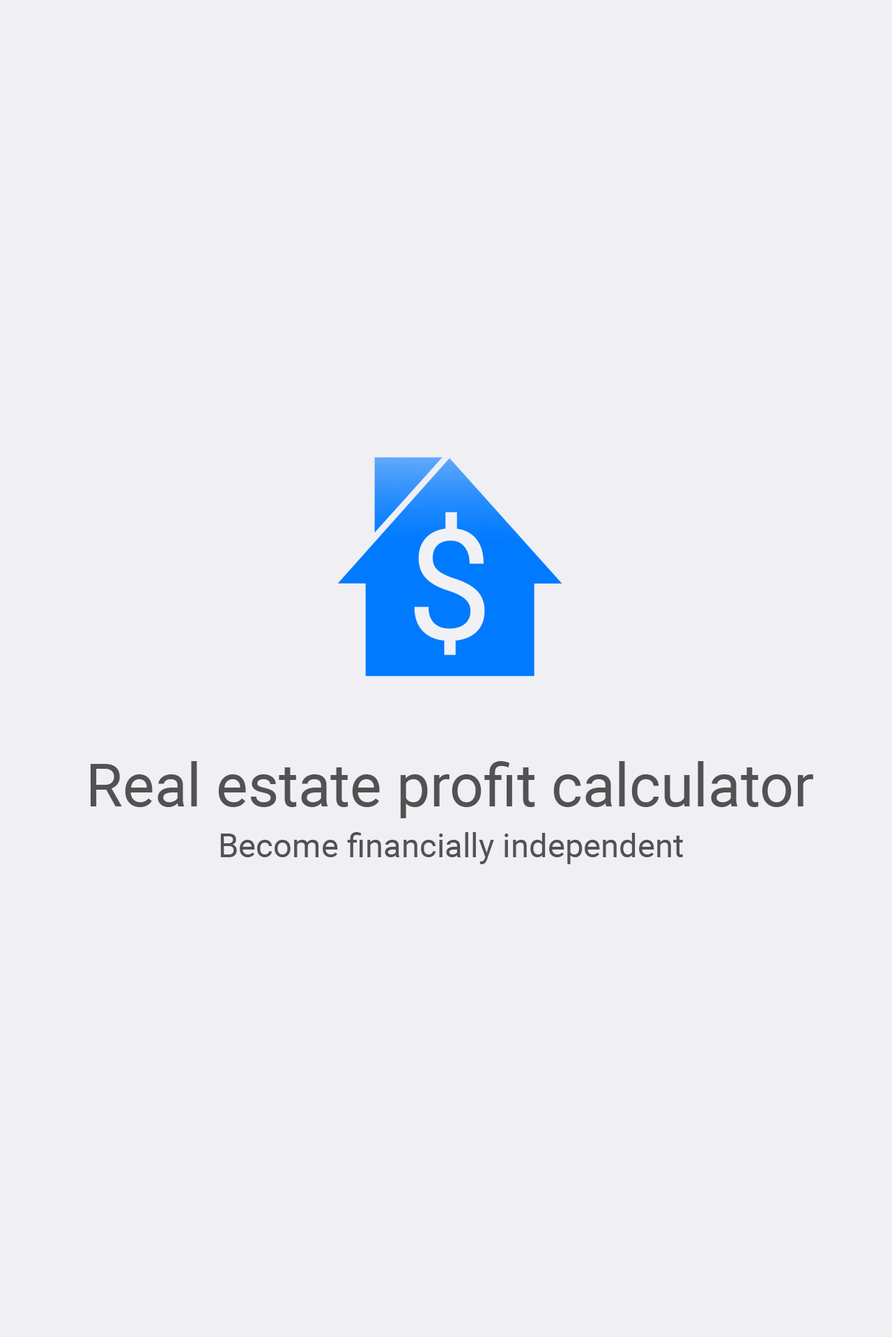
<style>
.page{position:relative;width:892px;height:1337px;background:#efeff4}
.page>*{position:absolute;margin:0}
.t1{font:153.7px "Roboto-Regular";color:#f1f1f5}
.t2{font:59.7px "Roboto-Regular";color:#525252}
.t3{font:33px "Roboto-Regular";color:#525252}
</style>
<div class="page">
<p class="t1" style="left:414px;top:512px;width:71px;height:143px">$</p>
<p class="t2" style="left:91px;top:761px;width:722px;height:57px">Real estate profit calculator</p>
<p class="t3" style="left:220px;top:832px;width:463px;height:32px">Become financially independent</p>
</div>
